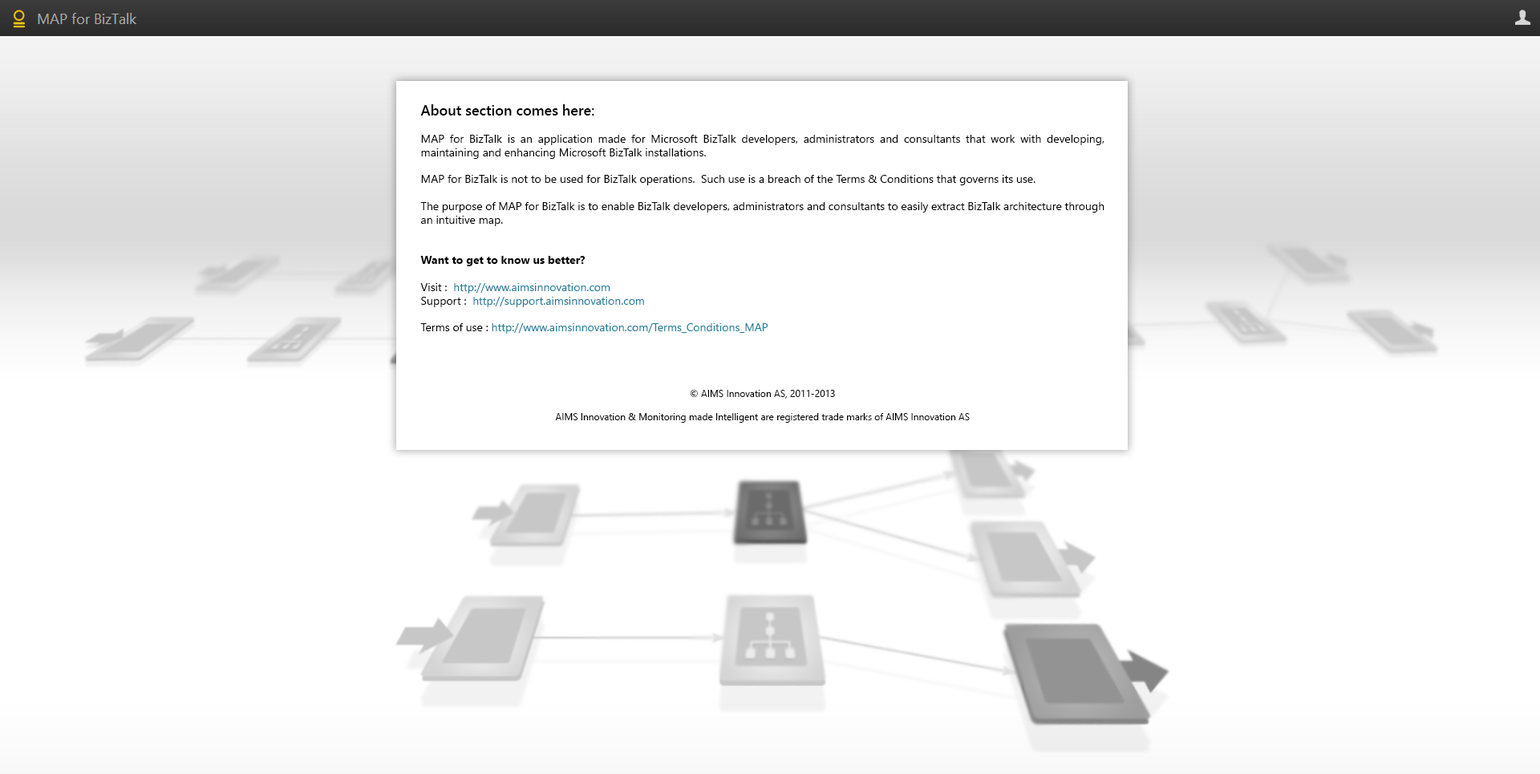
<style>
.page{position:relative;width:1540px;height:774px;background:#ffffff}
.page>*{position:absolute;margin:0}
.t1{font:11.2px "SegoeUI";color:#000000}
.t2{font:14.4px "SegoeUI-Semibold";color:#000000}
.t3{font:11.2px "SegoeUI-Bold";color:#000000}
.t4{font:11.2px "SegoeUI";color:#217e9d}
.t5{font:9.6px "SegoeUI";color:#000000}
</style>
<div class="page">
<p class="t1" style="left:420px;top:104px;width:685px;height:319px;text-align:justify"><span class="t2">About section comes here:<br></span><br>MAP for BizTalk is an application made for Microsoft BizTalk developers, administrators and consultants that work with developing, maintaining and enhancing Microsoft BizTalk installations.  <br><br>MAP for BizTalk is not to be used for BizTalk operations.  Such use is a breach of the Terms &amp; Conditions that governs its use. <br><br>The purpose of MAP for BizTalk is to enable BizTalk developers, administrators and consultants to easily extract BizTalk architecture through an intuitive map.<br><br><span class="t3"><br>Want to get to know us better?<br><br></span>Visit :  <span class="t4">http://www.aimsinnovation.com <br></span>Support :  <span class="t4">http://support.aimsinnovation.com<br></span><br>Terms of use : <span class="t4">http://www.aimsinnovation.com/Terms_Conditions_MAP<br><br><br><br><br></span><span class="t5">© AIMS Innovation AS, 2011-2013<br><br>AIMS Innovation &amp; Monitoring made Intelligent are registered trade marks of AIMS Innovation AS</span></p>
</div>
